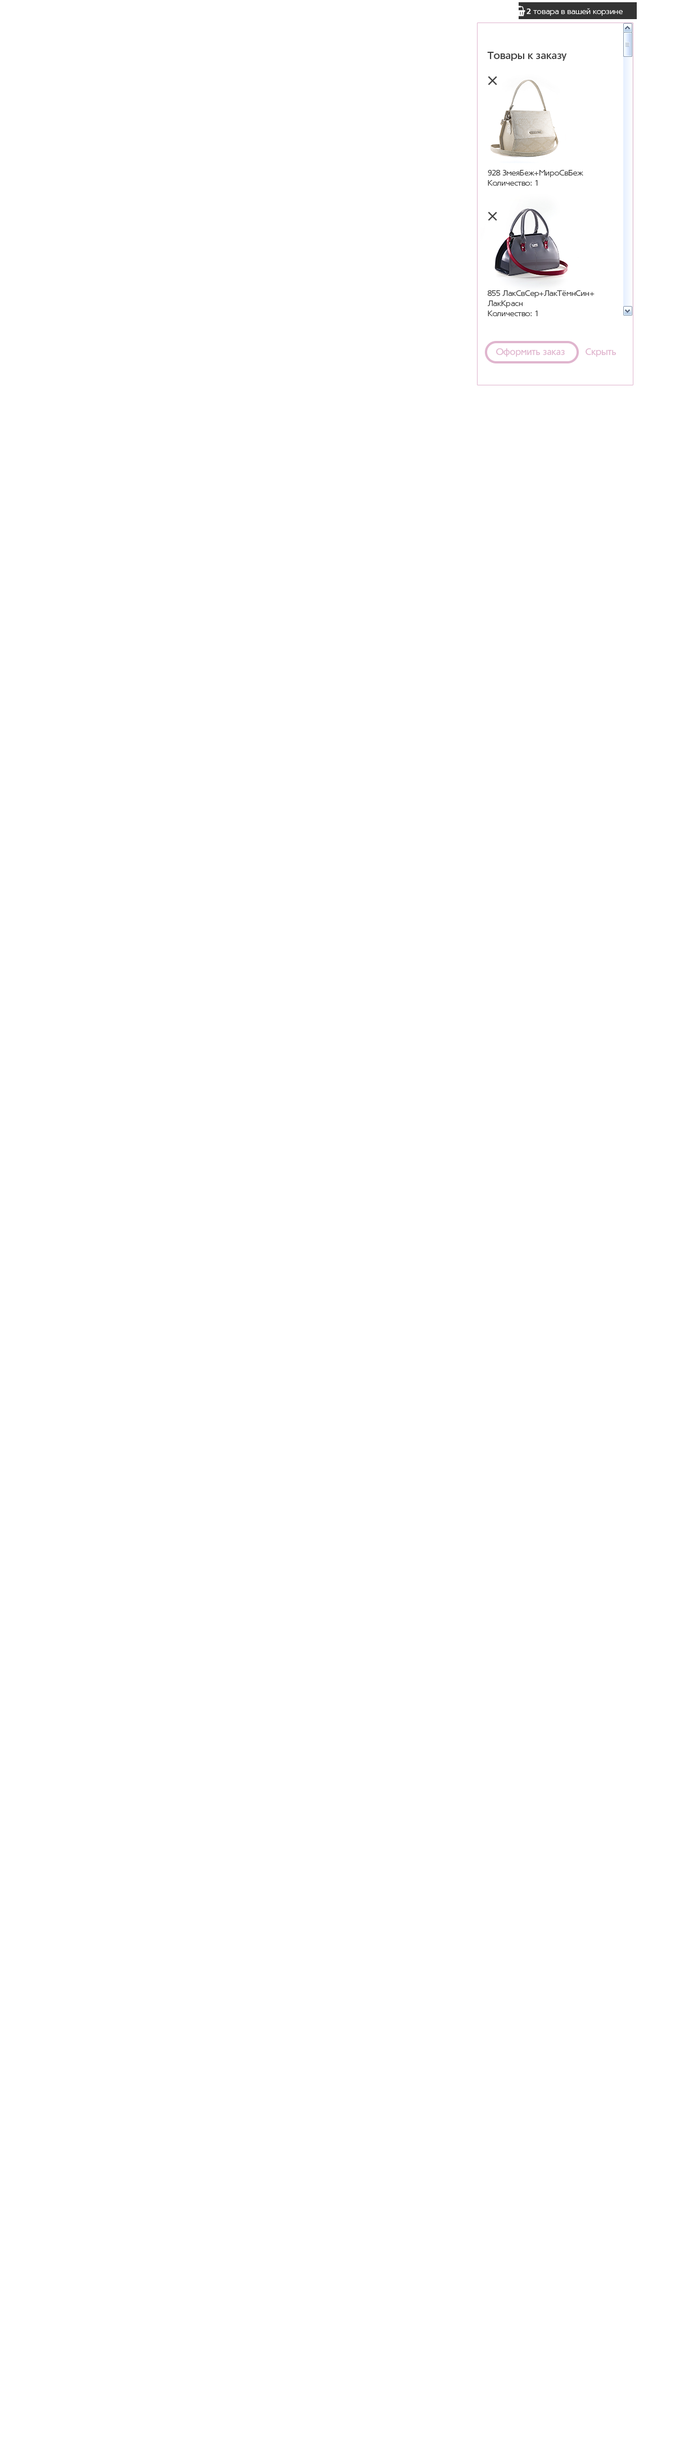
<style>
.page{position:relative;width:675px;height:2444px;background:#ffffff}
.page>*{position:absolute;margin:0}
.t1{font:7.9px "TornadoCyr-Light";color:#ffffff}
.t2{font:7.9px "TornadoCyr-Bold";color:#ffffff}
.t3{font:10.1px "TornadoCyr-Medium";color:#414141}
.t4{font:22.4px "TornadoCyr-Light";color:#414141}
.t5{font:7.9px/10.1px "TornadoCyr-Light";color:#414141}
.t6{font:9px "TornadoCyr-Regular";color:#e0b5ce}
</style>
<div class="page">
<p class="t1" style="left:527px;top:8px;width:96px;height:8px"><span class="t2">2 </span>товара в вашей корзине</p>
<p class="t3" style="left:487px;top:52px;width:80px;height:9px">Товары к заказу</p>
<p class="t4" style="left:488px;top:76px;width:9px;height:10px;rotate:45deg">+</p>
<p class="t5" style="left:488px;top:170px;width:95px;height:16px">928 ЗмеяБеж+МироСвБеж<br>Количество: 1</p>
<p class="t4" style="left:488px;top:212px;width:9px;height:9px;rotate:45deg">+</p>
<p class="t5" style="left:488px;top:290px;width:107px;height:26px">855 ЛакСвСер+ЛакТёмнСин+<br>ЛакКрасн<br>Количество: 1</p>
<p class="t6" style="left:496px;top:348px;width:69px;height:9px">Оформить заказ</p>
<p class="t6" style="left:586px;top:348px;width:30px;height:9px">Скрыть</p>
</div>
